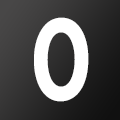
<style>
.page{position:relative;width:120px;height:120px}
.page>*{position:absolute;margin:0}
.t1{font:120px "MyriadPro-Bold";color:#ffffff;scale:0.7 1}
</style>
<div class="page">
<p class="t1" style="left:34px;top:17px;width:55px;height:85px">O</p>
</div>
